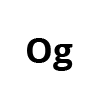
<style>
.page{position:relative;width:100px;height:100px;background:#ffffff}
.page>*{position:absolute;margin:0}
.t1{font:35px "OpenSans-Bold";color:#000000}
</style>
<div class="page">
<p class="t1" style="left:27px;top:38px;width:46px;height:33px">Og</p>
</div>
